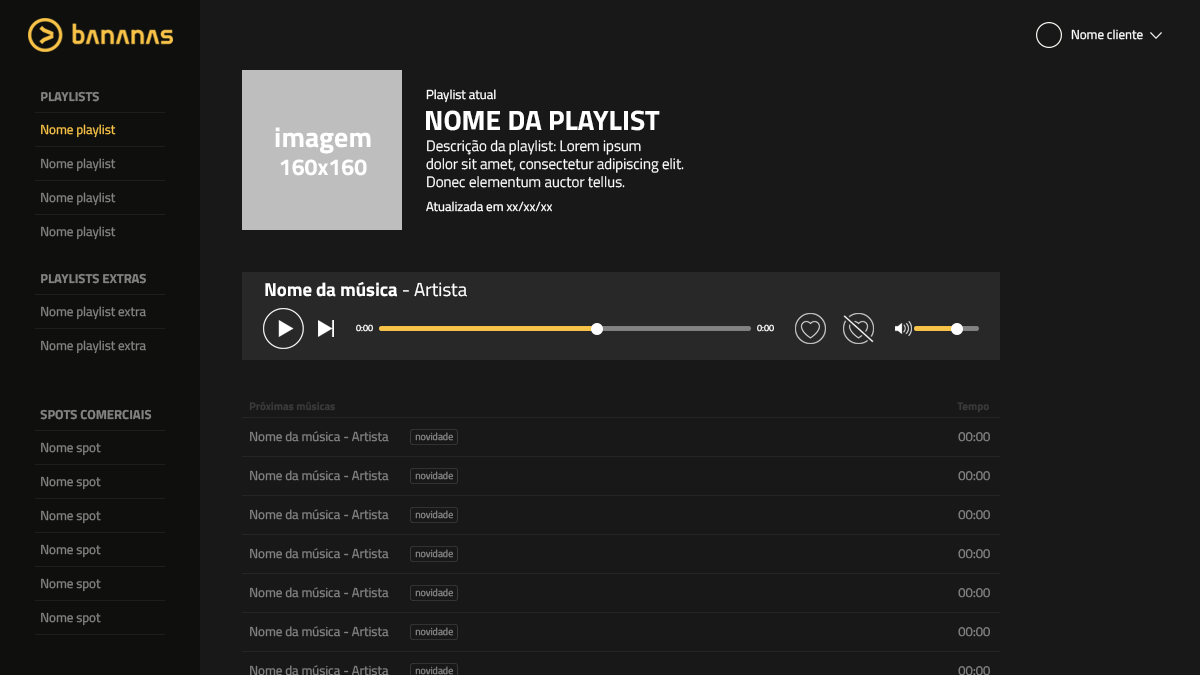
<style>
.page{position:relative;width:1200px;height:675px;background:#181818}
.page>*{position:absolute;margin:0}
.t1{font:13px "TitilliumWeb-Regular";color:#ffffff}
.t2{font:13px "TitilliumWeb-Bold";color:#828282}
.t3{font:28px "TitilliumWeb-Bold";color:#ffffff}
.t4{font:13px "TitilliumWeb-Regular";color:#f8c347}
.t5{font:23px "TitilliumWeb-Bold";color:#ffffff}
.t6{font:15px "TitilliumWeb-Light";color:#ffffff}
.t7{font:13px "TitilliumWeb-Regular";color:#828282}
.t8{font:18.7px "TitilliumWeb-Bold";color:#ffffff}
.t9{font:18.7px "TitilliumWeb-Regular";color:#ffffff}
.t10{font:9px "TitilliumWeb-Regular";color:#ffffff}
.t11{font:11px "TitilliumWeb-Bold";color:#3a3a3a}
.t12{font:10px "TitilliumWeb-Regular";color:#828282}
</style>
<div class="page">
<p class="t1" style="left:1071px;top:29px;width:72px;height:11px">Nome cliente</p>
<p class="t1" style="left:426px;top:89px;width:70px;height:14px">Playlist atual</p>
<p class="t2" style="left:41px;top:91px;width:58px;height:11px">PLAYLISTS</p>
<p class="t3" style="left:426px;top:110px;width:234px;height:21px">NOME DA PLAYLIST</p>
<p class="t4" style="left:41px;top:124px;width:75px;height:14px">Nome playlist</p>
<p class="t5" style="left:275px;top:127px;width:96px;height:49px;text-align:center"><span class="t3">imagem<br></span>160x160</p>
<p class="t6" style="left:426px;top:140px;width:258px;height:48px">Descrição da playlist: Lorem ipsum<br>dolor sit amet, consectetur adipiscing elit.<br>Donec elementum auctor tellus.</p>
<p class="t7" style="left:41px;top:158px;width:75px;height:14px">Nome playlist</p>
<p class="t7" style="left:41px;top:192px;width:75px;height:14px">Nome playlist</p>
<p class="t1" style="left:426px;top:201px;width:126px;height:11px">Atualizada em xx/xx/xx</p>
<p class="t7" style="left:41px;top:226px;width:75px;height:14px">Nome playlist</p>
<p class="t2" style="left:41px;top:273px;width:105px;height:11px">PLAYLISTS EXTRAS</p>
<p class="t8" style="left:265px;top:282px;width:202px;height:15px">Nome da música <span class="t9">- Artista</span></p>
<p class="t7" style="left:41px;top:306px;width:105px;height:14px">Nome playlist extra</p>
<p class="t10" style="left:356px;top:324px;width:17px;height:8px">0:00</p>
<p class="t10" style="left:757px;top:324px;width:17px;height:8px">0:00</p>
<p class="t7" style="left:41px;top:340px;width:105px;height:14px">Nome playlist extra</p>
<p class="t11" style="left:249px;top:401px;width:86px;height:10px">Próximas músicas</p>
<p class="t2" style="left:40px;top:409px;width:112px;height:11px">SPOTS COMERCIAIS</p>
<p class="t11" style="left:957px;top:402px;width:32px;height:11px">Tempo</p>
<p class="t7" style="left:250px;top:431px;width:139px;height:11px">Nome da música - Artista</p>
<p class="t12" style="left:415px;top:432px;width:38px;height:9px">novidade</p>
<p class="t7" style="left:958px;top:432px;width:32px;height:10px">00:00</p>
<p class="t7" style="left:41px;top:442px;width:60px;height:14px">Nome spot</p>
<p class="t7" style="left:250px;top:470px;width:139px;height:11px">Nome da música - Artista</p>
<p class="t12" style="left:415px;top:471px;width:38px;height:9px">novidade</p>
<p class="t7" style="left:958px;top:471px;width:32px;height:10px">00:00</p>
<p class="t7" style="left:41px;top:476px;width:60px;height:14px">Nome spot</p>
<p class="t7" style="left:41px;top:510px;width:60px;height:14px">Nome spot</p>
<p class="t7" style="left:250px;top:509px;width:139px;height:11px">Nome da música - Artista</p>
<p class="t12" style="left:415px;top:510px;width:38px;height:9px">novidade</p>
<p class="t7" style="left:958px;top:510px;width:32px;height:10px">00:00</p>
<p class="t7" style="left:41px;top:544px;width:60px;height:14px">Nome spot</p>
<p class="t7" style="left:250px;top:548px;width:139px;height:11px">Nome da música - Artista</p>
<p class="t12" style="left:415px;top:549px;width:38px;height:9px">novidade</p>
<p class="t7" style="left:958px;top:549px;width:32px;height:10px">00:00</p>
<p class="t7" style="left:41px;top:578px;width:60px;height:14px">Nome spot</p>
<p class="t7" style="left:250px;top:587px;width:139px;height:11px">Nome da música - Artista</p>
<p class="t12" style="left:415px;top:588px;width:38px;height:9px">novidade</p>
<p class="t7" style="left:958px;top:588px;width:32px;height:10px">00:00</p>
<p class="t7" style="left:41px;top:612px;width:60px;height:14px">Nome spot</p>
<p class="t7" style="left:250px;top:626px;width:139px;height:11px">Nome da música - Artista</p>
<p class="t12" style="left:415px;top:627px;width:38px;height:9px">novidade</p>
<p class="t7" style="left:958px;top:627px;width:32px;height:10px">00:00</p>
<p class="t7" style="left:250px;top:665px;width:139px;height:11px">Nome da música - Artista</p>
<p class="t12" style="left:415px;top:666px;width:38px;height:9px">novidade</p>
<p class="t7" style="left:958px;top:666px;width:32px;height:10px">00:00</p>
</div>
